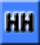
<style>
.page{position:relative;width:40px;height:45px;background:#4080ff}
.page>*{position:absolute;margin:0}
.t1{font:24px "GothicXB-HM"}
</style>
<div class="page">
<p class="t1" style="left:6px;top:13px;width:27px;height:18px">HH</p>
</div>
